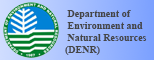
<style>
.page{position:relative;width:154px;height:60px}
.page>*{position:absolute;margin:0}
.t1{font:10px "TimesNewRomanPS-BoldMT";color:#454545}
</style>
<div class="page">
<p class="t1" style="left:65px;top:10px;width:82px;height:45px;text-align:right">Department of <br>Environment and <br>Natural Resources <br>(DENR)</p>
</div>
